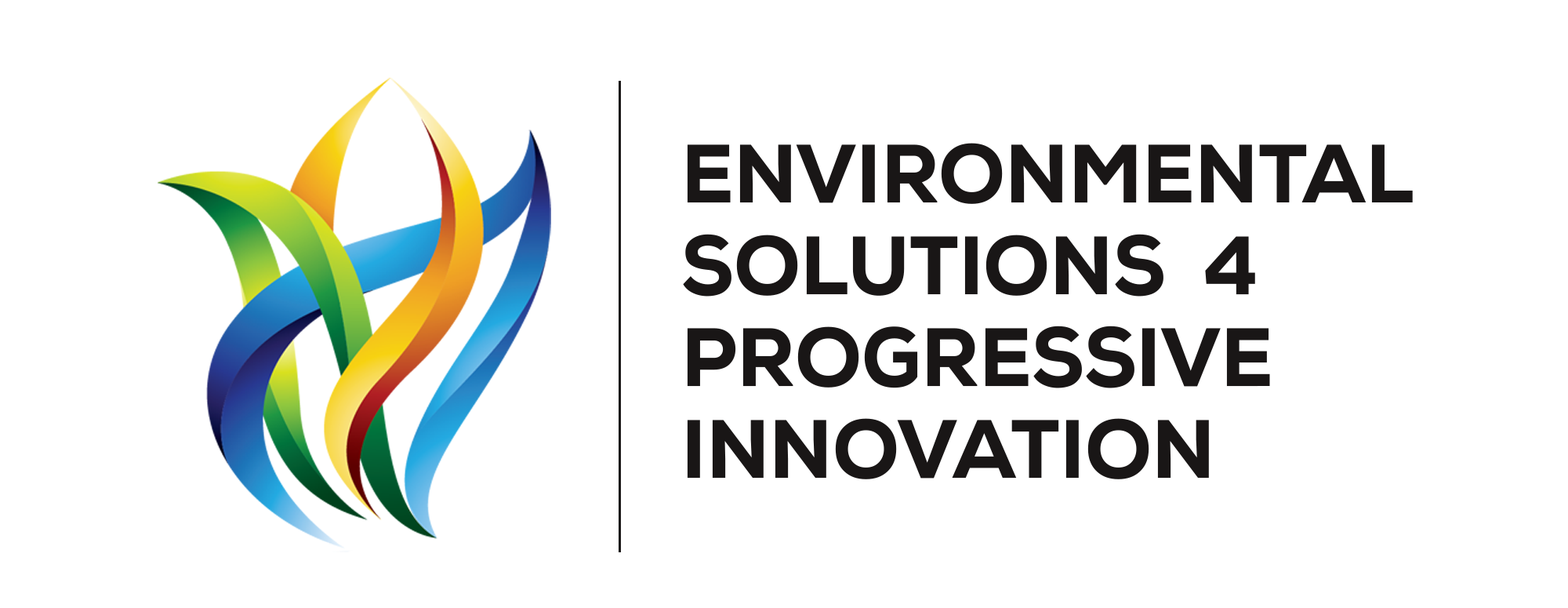
<style>
.page{position:relative;width:1568px;height:608px;background:#ffffff}
.page>*{position:absolute;margin:0}
.t1{font:82.4px/91.5px "NexaHeavy";color:#191616}
</style>
<div class="page">
<p class="t1" style="left:683px;top:143px;width:730px;height:336px">ENVIRONMENTAL <br>SOLUTIONS  4<br>PROGRESSIVE<br>INNOVATION</p>
</div>
